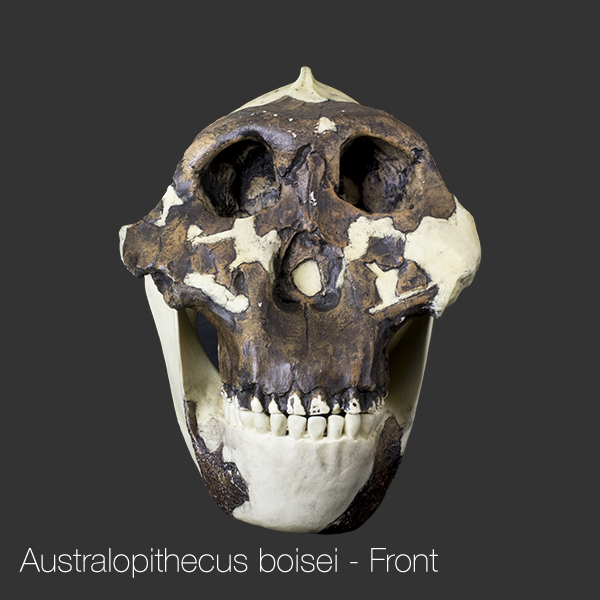
<style>
.page{position:relative;width:600px;height:600px;background:#333333}
.page>*{position:absolute;margin:0}
.t1{font:33.3px "HelveticaNeue-Thin";color:#ffffff}
</style>
<div class="page">
<p class="t1" style="left:19px;top:548px;width:419px;height:30px">Australopithecus boisei - Front</p>
</div>
